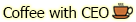
<style>
.page{position:relative;width:136px;height:22px;background:#ffffff}
.page>*{position:absolute;margin:0}
.t1{font:14.8px "Tahoma";color:#000000}
</style>
<div class="page">
<p class="t1" style="left:3px;top:6px;width:106px;height:12px">Coffee with CEO</p>
</div>
